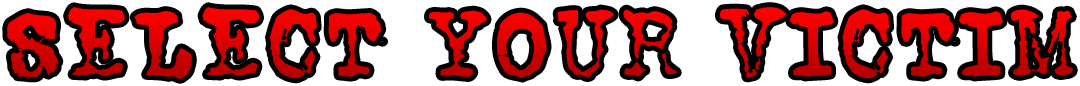
<style>
.page{position:relative;width:1080px;height:86px;background:#ffffff}
.page>*{position:absolute;margin:0}
.t1{font:96px "FoxScriptNormal"}
</style>
<div class="page">
<p class="t1" style="left:7px;top:7px;width:1066px;height:72px">SELECT YOUR VICTIM</p>
</div>
